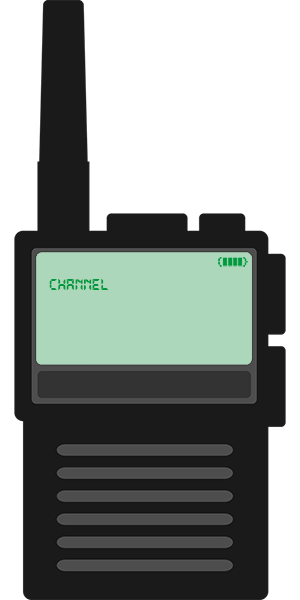
<style>
.page{position:relative;width:300px;height:600px;background:#ffffff}
.page>*{position:absolute;margin:0}
.t1{font:16.9px "DS-Digital-Bold";color:#00993d}
</style>
<div class="page">
<p class="t1" style="left:49px;top:279px;width:60px;height:11px">Channel</p>
</div>
